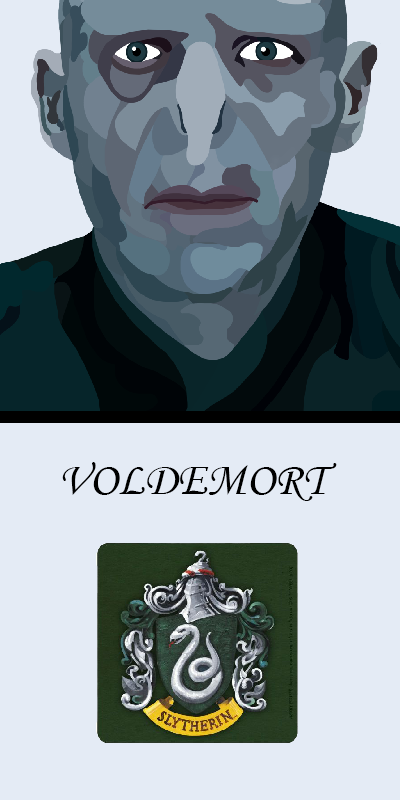
<style>
.page{position:relative;width:400px;height:800px;background:#e4ebf5}
.page>*{position:absolute;margin:0}
.t1{font:47px "MonotypeCorsiva";color:#000000}
</style>
<div class="page">
<p class="t1" style="left:62px;top:462px;width:275px;height:39px">VOLDEMORT</p>
</div>
